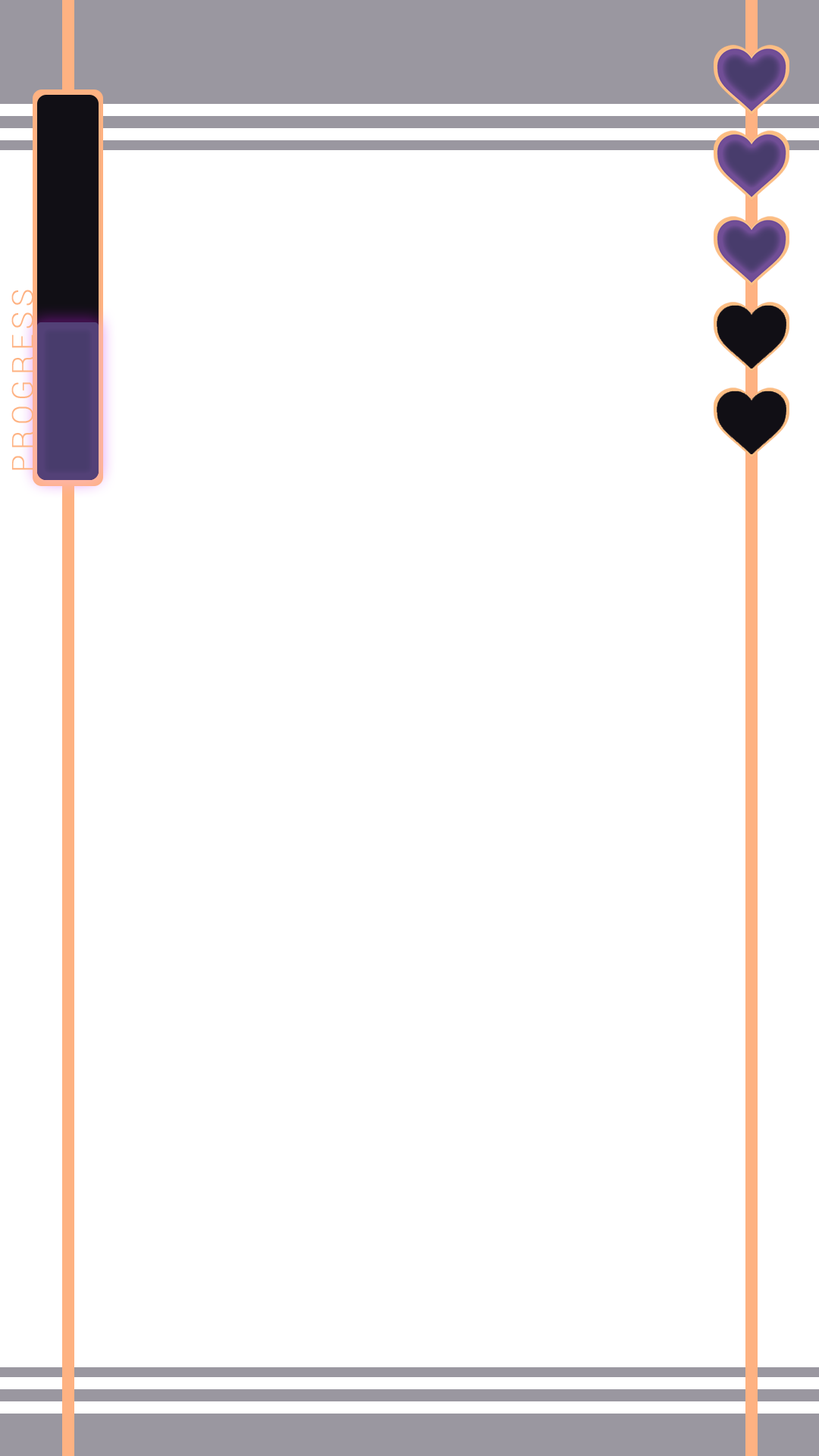
<style>
.page{position:relative;width:819px;height:1456px;background:#ffffff}
.page>*{position:absolute;margin:0}
.t1{font:28.4px "Roboto-Thin";letter-spacing:0.17em;color:#feb282;font-weight:bold}
</style>
<div class="page">
<p class="t1" style="left:11px;top:290px;width:22px;height:180px;rotate:-90deg">PROGRESS</p>
</div>
